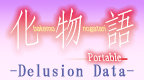
<style>
.page{position:relative;width:144px;height:80px}
.page>*{position:absolute;margin:0}
.t1{font:88px "Typeface";letter-spacing:0.14em;color:#ffffff;scale:0.75 1}
.t2{font:88px "Typeface";letter-spacing:0.13em;color:#ffffff;scale:0.7 1}
.t3{font:88px "Typeface";letter-spacing:0.13em;color:#ffffff;scale:0.75 1}
.t4{font:7.2px "ShinGoPro-Regular";color:#fdeca0;font-weight:bold;scale:0.71 1}
.t5{font:10.6px "AdobeFangsongStd-Regular";letter-spacing:0.05em;color:#ffffff;scale:0.77 1}
.t6{font:16px "HGMinchoB";letter-spacing:0.05em;color:#5a64aa}
</style>
<div class="page">
<p class="t1" style="left:10px;top:8px;width:124px;height:42px">a<span class="t2">b </span><span class="t3">c</span></p>
<p class="t4" style="left:33px;top:25px;width:73px;height:8px">bakemo                nogatari</p>
<p class="t5" style="left:87px;top:52px;width:35px;height:10px">Portable</p>
<p class="t6" style="left:10px;top:64px;width:124px;height:13px">-Delusion Data-</p>
</div>
